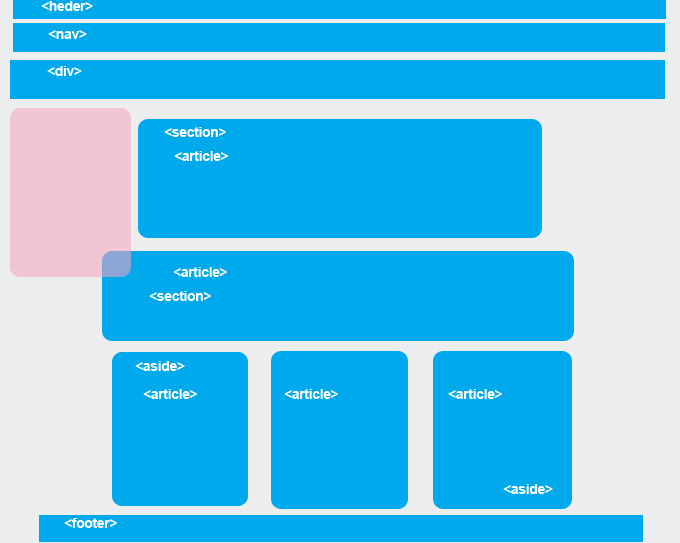
<style>
.page{position:relative;width:680px;height:543px;background:#00a8ec}
.page>*{position:absolute;margin:0}
.t1{font:14px "Arial-BoldMT";letter-spacing:-0.025em;color:#ffffff}
</style>
<div class="page">
<p class="t1" style="left:41px;top:1px;width:52px;height:10px">&lt;heder&gt;</p>
<p class="t1" style="left:48px;top:30px;width:39px;height:9px">&lt;nav&gt;</p>
<p class="t1" style="left:47px;top:66px;width:35px;height:10px">&lt;div&gt;</p>
<p class="t1" style="left:164px;top:127px;width:62px;height:10px">&lt;section&gt;</p>
<p class="t1" style="left:174px;top:151px;width:54px;height:10px">&lt;article&gt;</p>
<p class="t1" style="left:173px;top:267px;width:54px;height:10px">&lt;article&gt;</p>
<p class="t1" style="left:149px;top:291px;width:62px;height:10px">&lt;section&gt;</p>
<p class="t1" style="left:135px;top:361px;width:50px;height:10px">&lt;aside&gt;</p>
<p class="t1" style="left:143px;top:389px;width:54px;height:10px">&lt;article&gt;</p>
<p class="t1" style="left:284px;top:389px;width:54px;height:10px">&lt;article&gt;</p>
<p class="t1" style="left:448px;top:389px;width:54px;height:10px">&lt;article&gt;</p>
<p class="t1" style="left:503px;top:484px;width:50px;height:10px">&lt;aside&gt;</p>
<p class="t1" style="left:64px;top:518px;width:53px;height:10px">&lt;footer&gt;</p>
</div>
